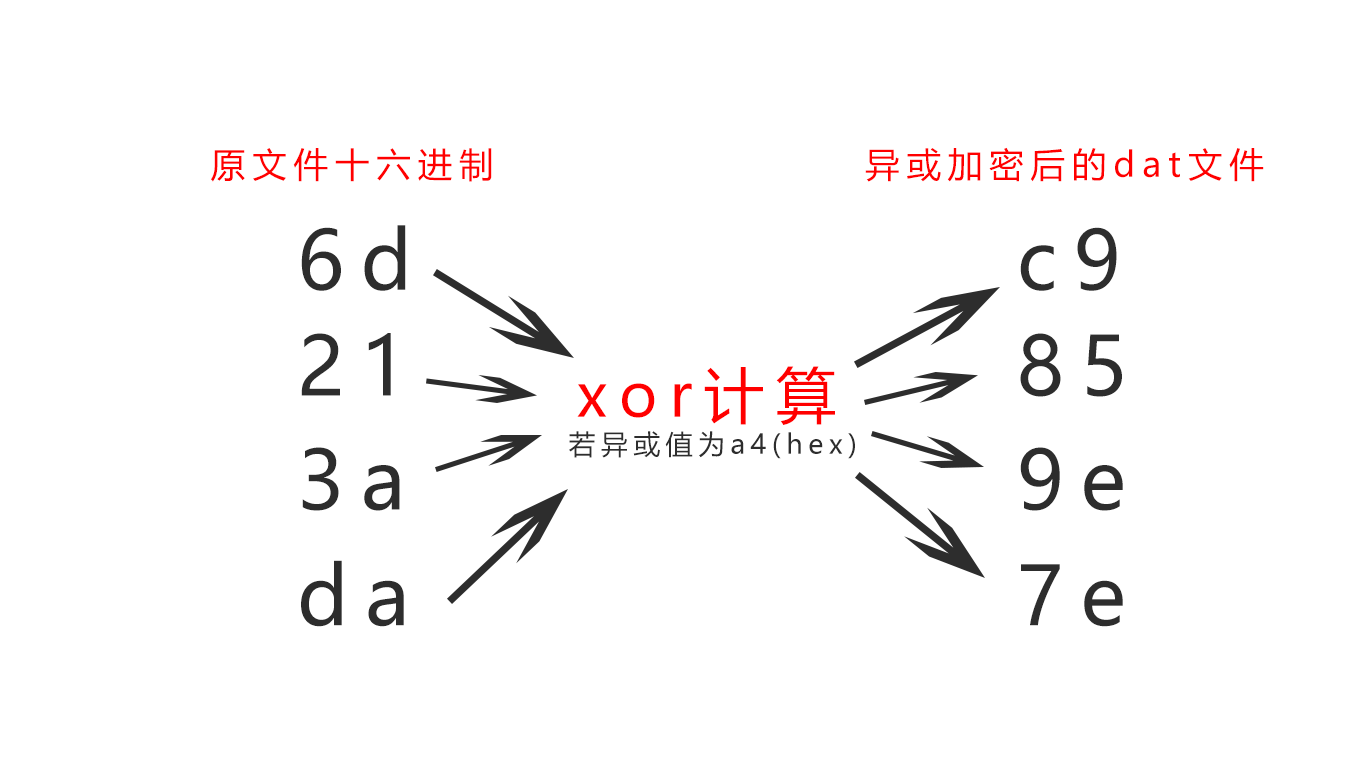
<style>
.page{position:relative;width:1366px;height:768px;background:#ffffff}
.page>*{position:absolute;margin:0}
.t1{font:34.5px "MicrosoftYaHeiUI";letter-spacing:0.2em;color:#ff0000}
.t2{font:80.8px "MicrosoftYaHeiUI";letter-spacing:0.2em;color:#2d2d2d}
.t3{font:60px "MicrosoftYaHeiUI";letter-spacing:0.2em;color:#ff0000}
.t4{font:27px "MicrosoftYaHeiUI";letter-spacing:0.2em;color:#2d2d2d}
</style>
<div class="page">
<p class="t1" style="left:211px;top:148px;width:281px;height:34px">原文件十六进制</p>
<p class="t1" style="left:865px;top:147px;width:399px;height:35px">异或加密后的dat文件</p>
<p class="t2" style="left:301px;top:225px;width:105px;height:66px">6d</p>
<p class="t2" style="left:1020px;top:227px;width:97px;height:64px">c9</p>
<p class="t2" style="left:301px;top:333px;width:90px;height:63px">21</p>
<p class="t2" style="left:1020px;top:333px;width:102px;height:64px">85</p>
<p class="t3" style="left:577px;top:366px;width:258px;height:59px">xor计算</p>
<p class="t4" style="left:569px;top:431px;width:286px;height:28px">若异或值为a4(hex)</p>
<p class="t2" style="left:302px;top:447px;width:98px;height:64px">3a</p>
<p class="t2" style="left:1020px;top:447px;width:103px;height:64px">9e</p>
<p class="t2" style="left:301px;top:560px;width:103px;height:67px">da</p>
<p class="t2" style="left:1021px;top:564px;width:102px;height:63px">7e</p>
</div>
